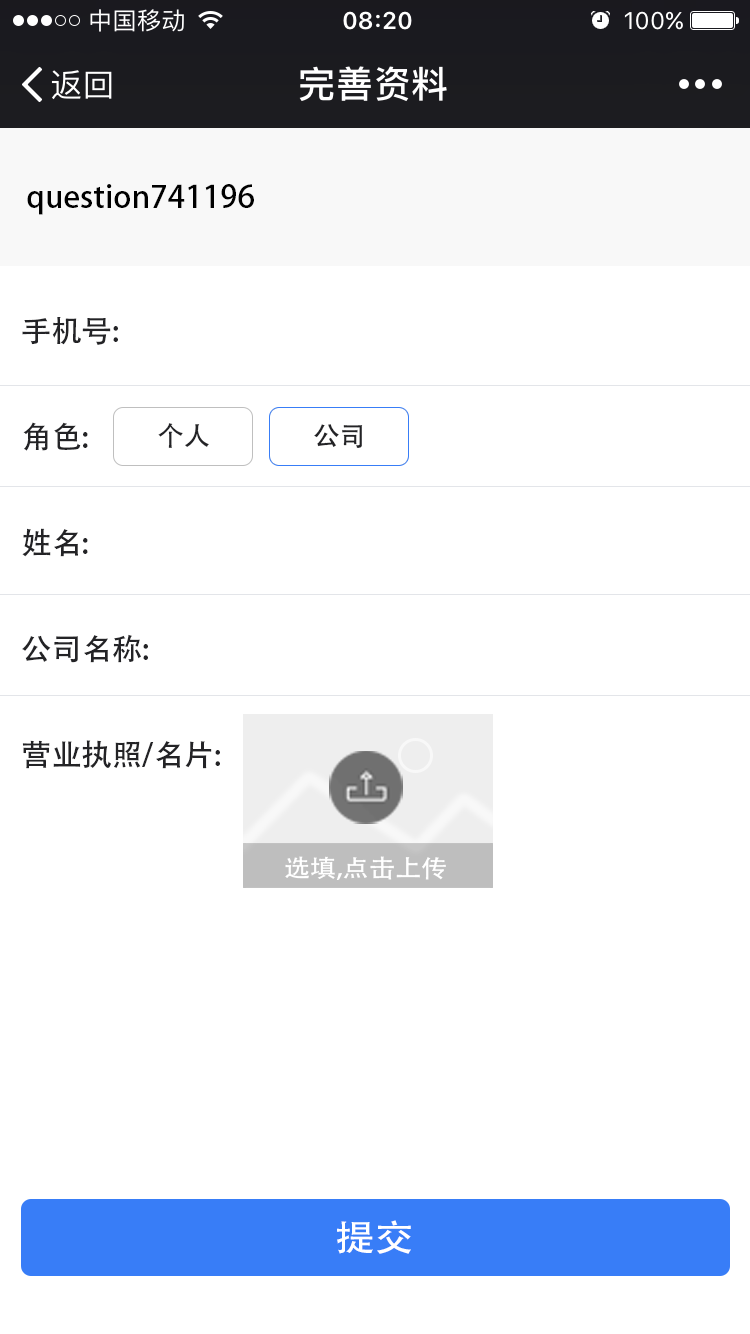
<style>
.page{position:relative;width:750px;height:1334px;background:#ffffff}
.page>*{position:absolute;margin:0}
.t1{font:31px "AdobeHeitiStd-Regular";color:#000000}
.t2{font:30.3px/106px "AdobeHeitiStd-Regular";color:#232326}
.t3{font:26.7px "AdobeHeitiStd-Regular";color:#232326}
.t4{font:24px "AdobeHeitiStd-Regular";color:#ffffff;scale:1.09 1}
.t5{font:36.1px "AdobeHeitiStd-Regular";color:#ffffff;scale:1.09 1}
</style>
<div class="page">
<p class="t1" style="left:27px;top:184px;width:227px;height:31px">question741196</p>
<p class="t2" style="left:22px;top:317px;width:198px;height:452px">手机号:<br>角色:<br>姓名:<br>公司名称:<br>营业执照/名片:</p>
<p class="t3" style="left:158px;top:423px;width:51px;height:25px">个人</p>
<p class="t3" style="left:314px;top:424px;width:49px;height:24px">公司</p>
<p class="t4" style="left:285px;top:856px;width:161px;height:24px">选填,点击上传</p>
<p class="t5" style="left:337px;top:1220px;width:74px;height:34px">提交</p>
</div>
